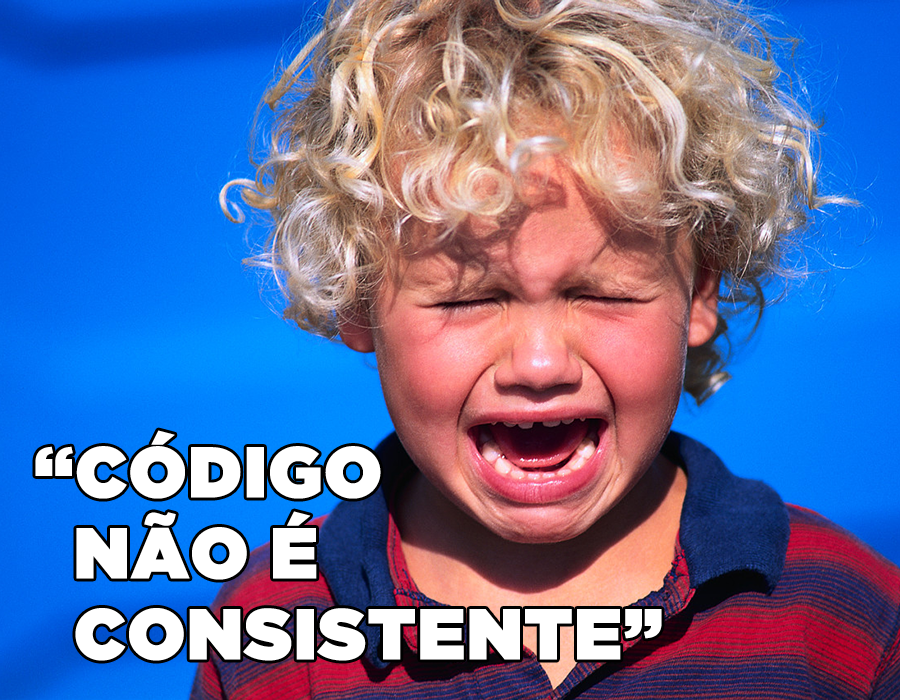
<style>
.page{position:relative;width:900px;height:700px}
.page>*{position:absolute;margin:0}
.t1{font:71.2px/80.9px "GothamUltra";color:#ffffff;font-weight:bold}
</style>
<div class="page">
<p class="t1" style="left:35px;top:430px;width:627px;height:231px">“CÓDIGO<br>  NÃO É<br>  CONSISTENTE”</p>
</div>
